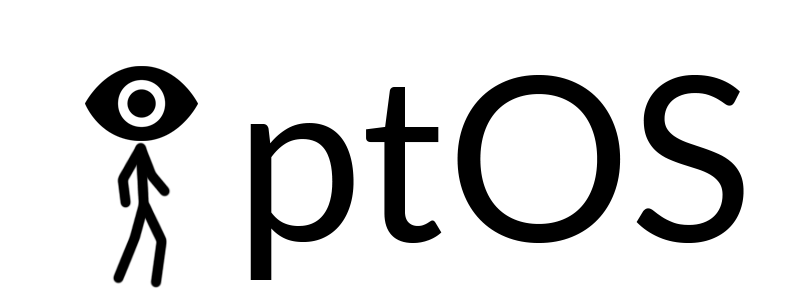
<style>
.page{position:relative;width:800px;height:300px;background:#ffffff}
.page>*{position:absolute;margin:0}
.t1{font:230px "Lato-Regular";color:#000000}
</style>
<div class="page">
<p class="t1" style="left:250px;top:75px;width:494px;height:205px">ptOS</p>
</div>
